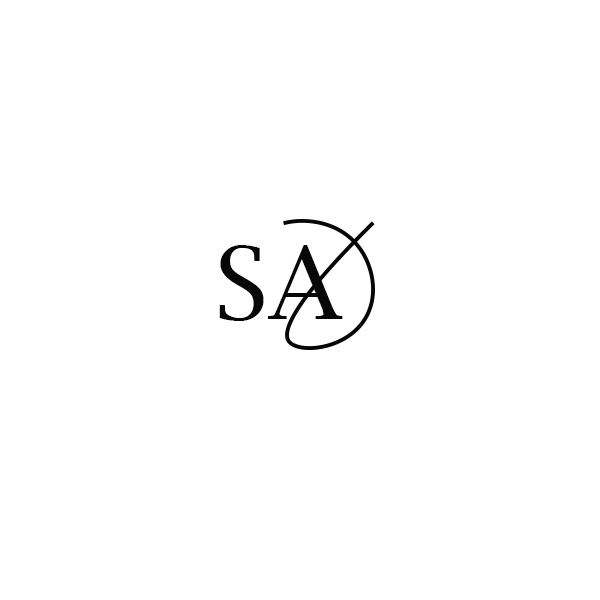
<style>
.page{position:relative;width:600px;height:600px;background:#ffffff}
.page>*{position:absolute;margin:0}
.t1{font:100px "LucidaBright";color:#070707}
</style>
<div class="page">
<p class="t1" style="left:219px;top:245px;width:124px;height:76px">SA</p>
</div>
